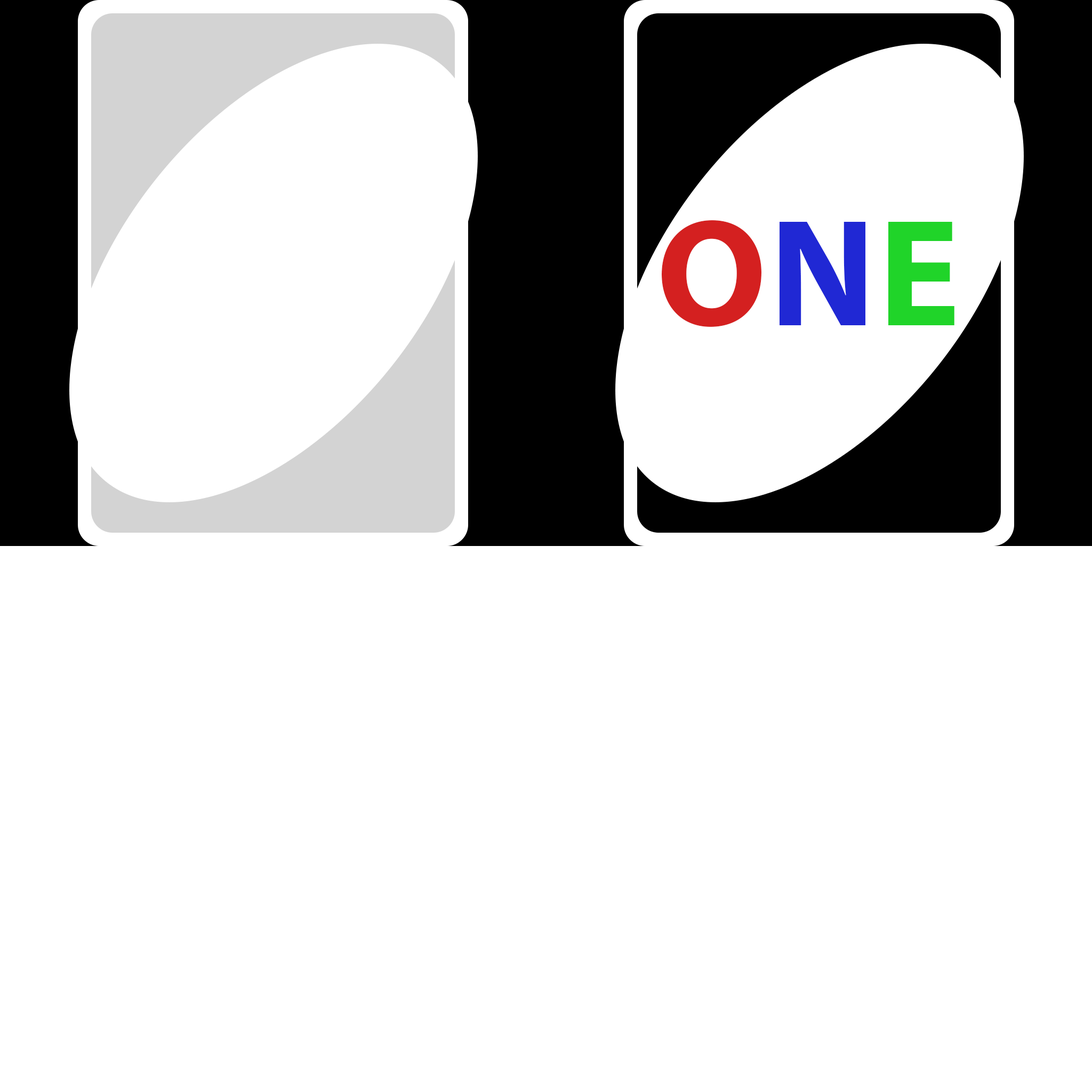
<style>
.page{position:relative;width:1092px;height:1092px;background:#ffffff}
.page>*{position:absolute;margin:0}
.t1{font:153.6px "MyriadPro-Bold";color:#d42020;text-transform:uppercase}
.t2{font:153.6px "MyriadPro-Bold";color:#2028d4;text-transform:uppercase}
.t3{font:153.6px "MyriadPro-Bold";color:#20d429;text-transform:uppercase}
</style>
<div class="page">
<p class="t1" style="left:662px;top:220px;width:292px;height:107px">O<span class="t2">N</span><span class="t3">E</span></p>
</div>
